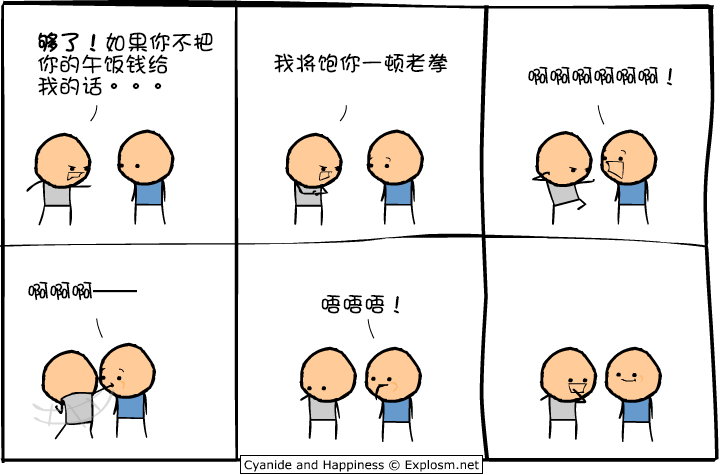
<style>
.page{position:relative;width:720px;height:475px;background:#ffffff}
.page>*{position:absolute;margin:0}
.t1{font:22px/22px "DFGirl";color:#000000}
.t2{font:22px/22px "DFGirl";color:#000000;font-weight:bold}
.t3{font:22px "DFGirl";color:#000000}
</style>
<div class="page">
<p class="t1" style="left:38px;top:32px;width:175px;height:64px"><span class="t2">够了！</span>如果你不把<br>你的午饭钱给<br>我的话。。。</p>
<p class="t3" style="left:274px;top:53px;width:174px;height:20px">我将饱你一顿老拳</p>
<p class="t3" style="left:528px;top:66px;width:145px;height:20px">啊啊啊啊啊啊！</p>
<p class="t3" style="left:28px;top:281px;width:109px;height:20px">啊啊啊——</p>
<p class="t3" style="left:321px;top:295px;width:79px;height:19px">唔唔唔！</p>
</div>
